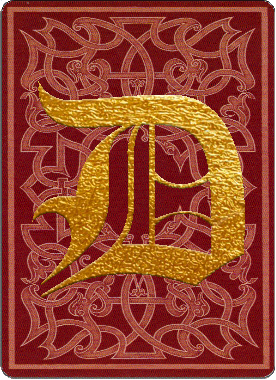
<style>
.page{position:relative;width:276px;height:380px}
.page>*{position:absolute;margin:0}
.t1{font:300px "OldLondon"}
</style>
<div class="page">
<p class="t1" style="left:32px;top:81px;width:213px;height:217px">D</p>
</div>
